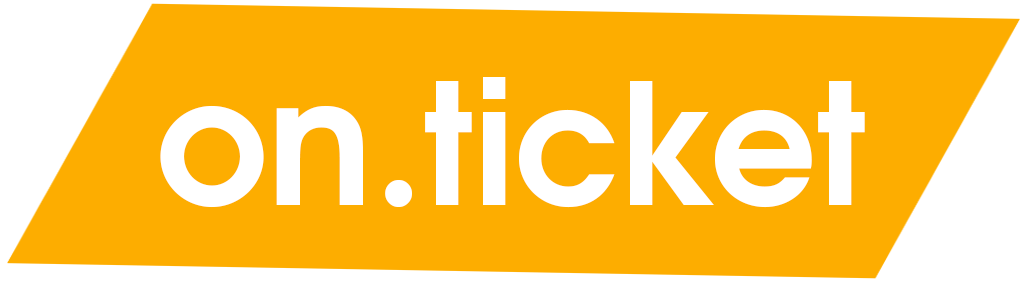
<style>
.page{position:relative;width:1024px;height:282px;background:#fdad00}
.page>*{position:absolute;margin:0}
.t1{font:167.2px "TeXGyreAdventor-Bold";color:#ffffff}
.t2{font:175.5px "TeXGyreAdventor-Bold";color:#ffffff}
.t3{font:167.2px "CopperplateGothic-Bold";color:#ffffff}
</style>
<div class="page">
<p class="t1" style="left:160px;top:77px;width:705px;height:131px"><span class="t2">on</span><span class="t3">.</span>ticket</p>
</div>
